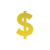
<style>
.page{position:relative;width:50px;height:50px;background:#ffffff}
.page>*{position:absolute;margin:0}
.t1{font:36px "TwCenMT-CondensedExtraBold";color:#ddc532}
</style>
<div class="page">
<p class="t1" style="left:16px;top:11px;width:18px;height:28px">$</p>
</div>
